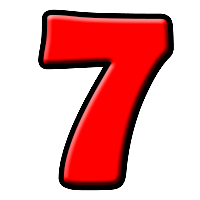
<style>
.page{position:relative;width:200px;height:200px;background:#ffffff}
.page>*{position:absolute;margin:0}
.t1{font:273px "BerlinSansFBDemi-Bold";color:#ff0000}
</style>
<div class="page">
<p class="t1" style="left:43px;top:15px;width:126px;height:170px">7</p>
</div>
